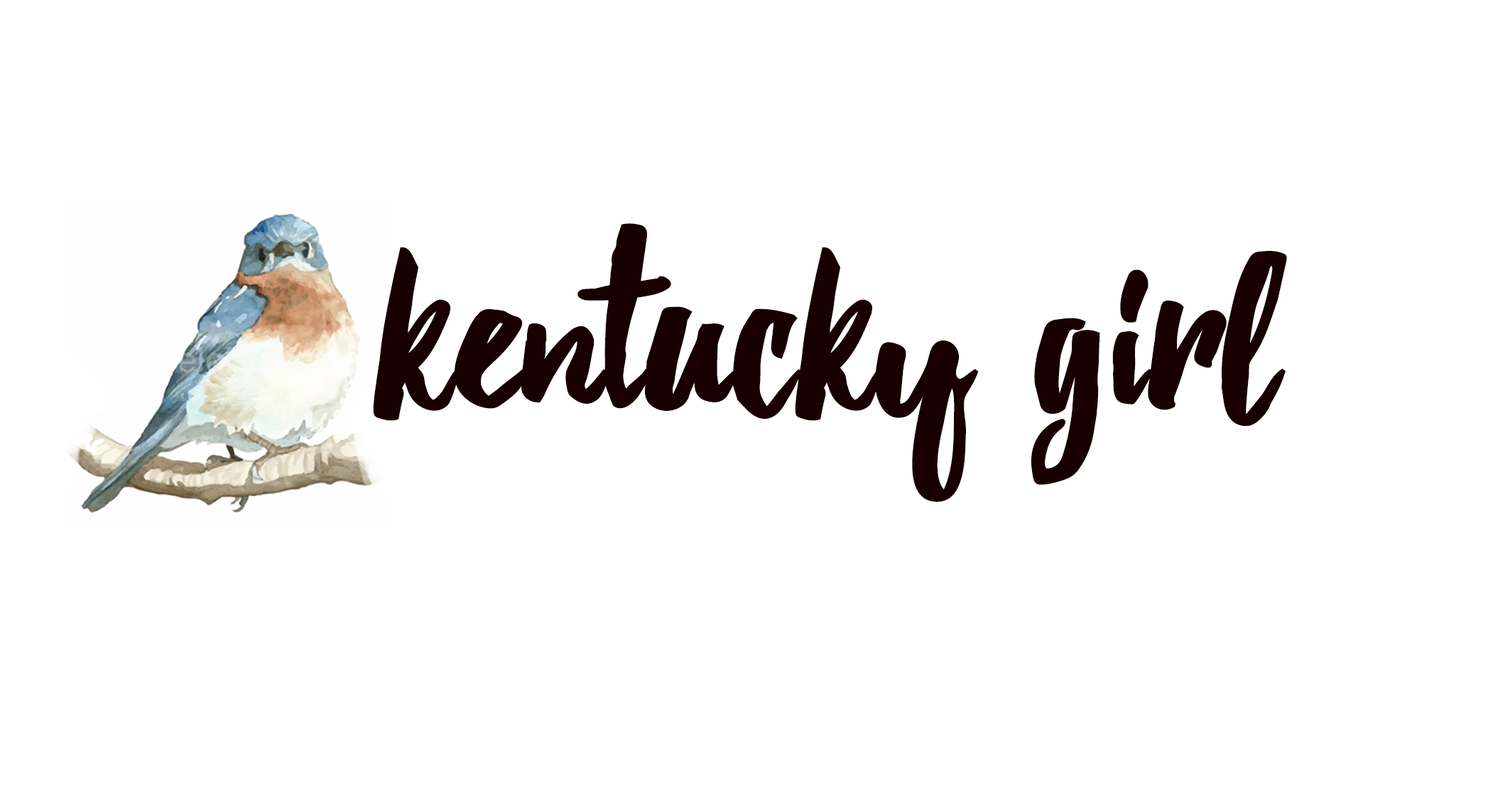
<style>
.page{position:relative;width:1493px;height:799px;background:#ffffff}
.page>*{position:absolute;margin:0}
.t1{font:229.1px "Debby";color:#180001;font-weight:bold}
</style>
<div class="page">
<p class="t1" style="left:373px;top:223px;width:914px;height:279px">kentucky girl</p>
</div>
